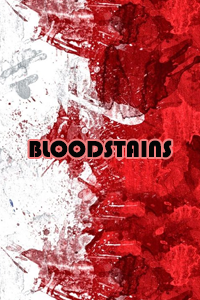
<style>
.page{position:relative;width:200px;height:300px}
.page>*{position:absolute;margin:0}
.t1{font:24px "Bauhaus93";color:#050505}
</style>
<div class="page">
<p class="t1" style="left:29px;top:140px;width:143px;height:18px">BLOODSTAINS</p>
</div>
